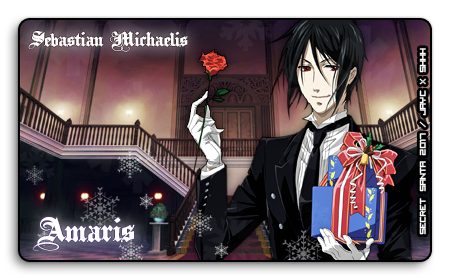
<style>
.page{position:relative;width:450px;height:280px}
.page>*{position:absolute;margin:0}
.t1{font:16.7px "PlainBlackWide-Normal";letter-spacing:-0.025em;color:#ffffff}
.t2{font:13.9px "VisitorTT2-BRK-";letter-spacing:-0.025em;color:#ffffff}
.t3{font:27.8px "PlainBlackWide-Normal";letter-spacing:-0.025em;color:#ffffff}
</style>
<div class="page">
<p class="t1" style="left:28px;top:31px;width:160px;height:21px">Sebastian Michaelis</p>
<p class="t2" style="left:419px;top:48px;width:7px;height:187px;rotate:-90deg">SECRET SANTA 2017 / JAYC X SHHH</p>
<p class="t3" style="left:33px;top:217px;width:102px;height:34px">Amaris</p>
</div>
